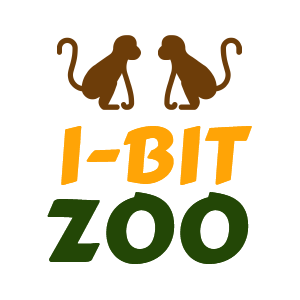
<style>
.page{position:relative;width:300px;height:300px;background:#ffffff}
.page>*{position:absolute;margin:0}
.t1{font:77.6px "CarterOne";letter-spacing:0.02em;color:#ffa406}
.t2{font:91.7px "CarterOne";letter-spacing:0.02em;color:#234706}
</style>
<div class="page">
<p class="t1" style="left:61px;top:126px;width:191px;height:59px">I-BIT</p>
<p class="t2" style="left:47px;top:192px;width:202px;height:72px">ZOO</p>
</div>
